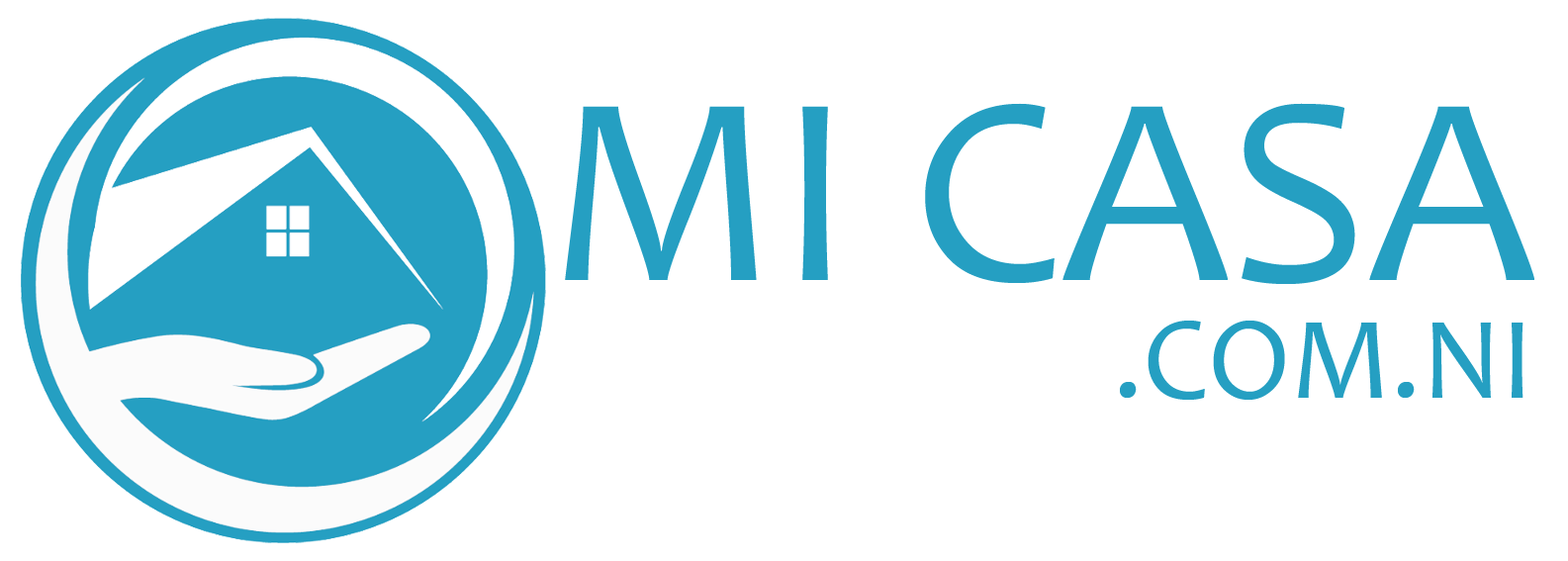
<style>
.page{position:relative;width:1568px;height:561px;background:#ffffff}
.page>*{position:absolute;margin:0}
.t1{font:272px "Candara";color:#259fc2}
.t2{font:118.7px "Candara";color:#259fc2}
</style>
<div class="page">
<p class="t1" style="left:565px;top:103px;width:969px;height:181px">MI CASA</p>
<p class="t2" style="left:1120px;top:321px;width:403px;height:79px">.COM.NI</p>
</div>
